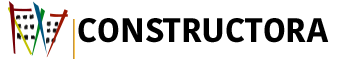
<style>
.page{position:relative;width:338px;height:59px;background:#ffffff}
.page>*{position:absolute;margin:0}
.t1{font:34px "KohinoorBangla-Bold";color:#000000}
</style>
<div class="page">
<p class="t1" style="left:78px;top:18px;width:251px;height:25px">CONSTRUCTORA</p>
</div>
